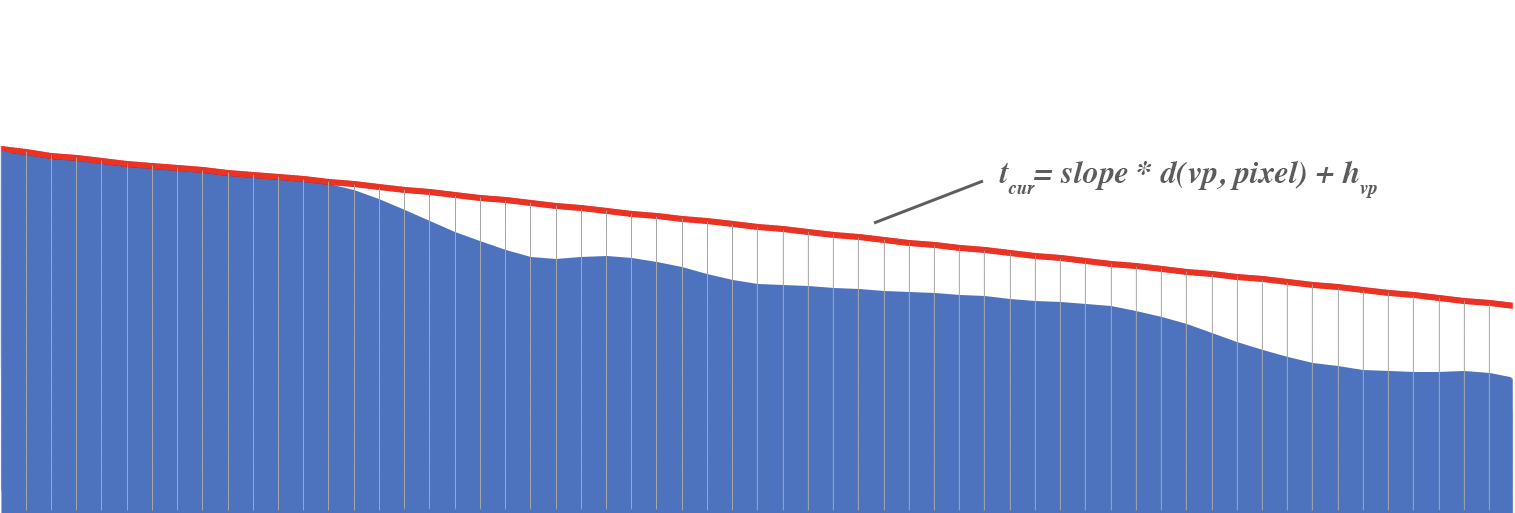
<style>
.page{position:relative;width:1515px;height:513px;background:#ffffff}
.page>*{position:absolute;margin:0}
.t1{font:32px "Times-BoldItalic";color:#5c5c5c}
</style>
<div class="page">
<p class="t1" style="left:999px;top:161px;width:378px;height:37px">tcur= slope * d(vp, pixel) + hvp</p>
</div>
